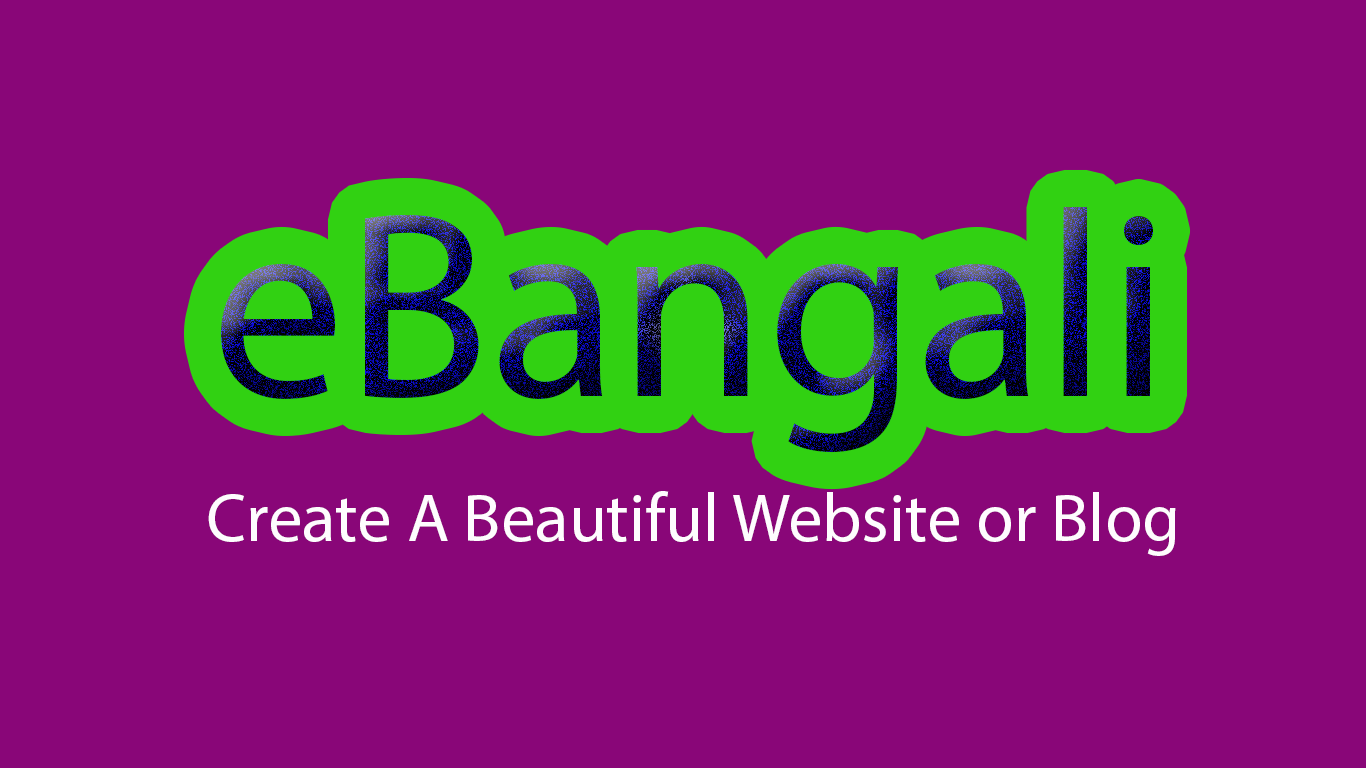
<style>
.page{position:relative;width:1366px;height:768px;background:#890678}
.page>*{position:absolute;margin:0}
.t1{font:266.4px "MyriadPro-Regular"}
.t2{font:68.8px "MyriadPro-Regular";color:#fefcfe}
</style>
<div class="page">
<p class="t1" style="left:221px;top:207px;width:932px;height:246px">eBangali</p>
<p class="t2" style="left:208px;top:491px;width:968px;height:65px">Create A Beautiful Website or Blog</p>
</div>
